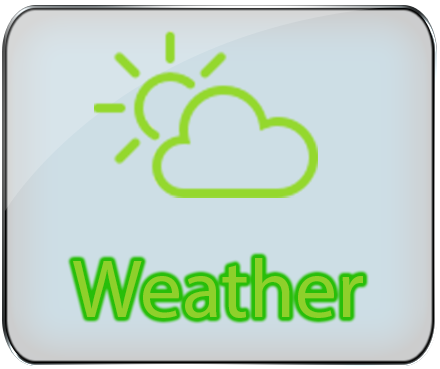
<style>
.page{position:relative;width:440px;height:369px;background:#cddee5}
.page>*{position:absolute;margin:0}
.t1{font:83.2px "MyriadPro-Regular";color:#8ed02b}
</style>
<div class="page">
<p class="t1" style="left:73px;top:258px;width:290px;height:60px">Weather</p>
</div>
